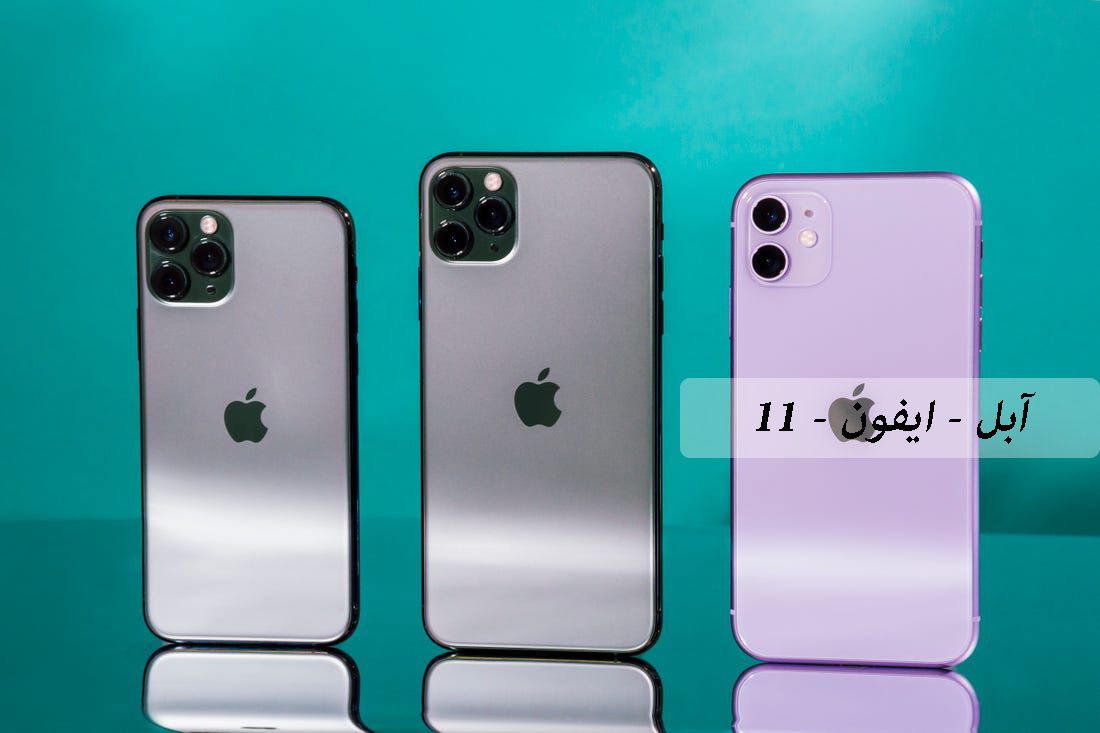
<style>
.page{position:relative;width:1100px;height:733px}
.page>*{position:absolute;margin:0}
.t1{font:64px "AdobeArabic-Bold";color:#000000;font-style:italic}
</style>
<div class="page">
<p class="t1" style="left:756px;top:392px;width:280px;height:52px">آبل - ايفون - 11</p>
</div>
